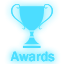
<style>
.page{position:relative;width:64px;height:64px;background:#ffffff}
.page>*{position:absolute;margin:0}
.t1{font:14px "FranklinGothic-Medium";color:#4cddff}
</style>
<div class="page">
<p class="t1" style="left:10px;top:51px;width:45px;height:11px">Awards</p>
<p class="t1" style="left:10px;top:51px;width:45px;height:11px">Awards</p>
</div>
